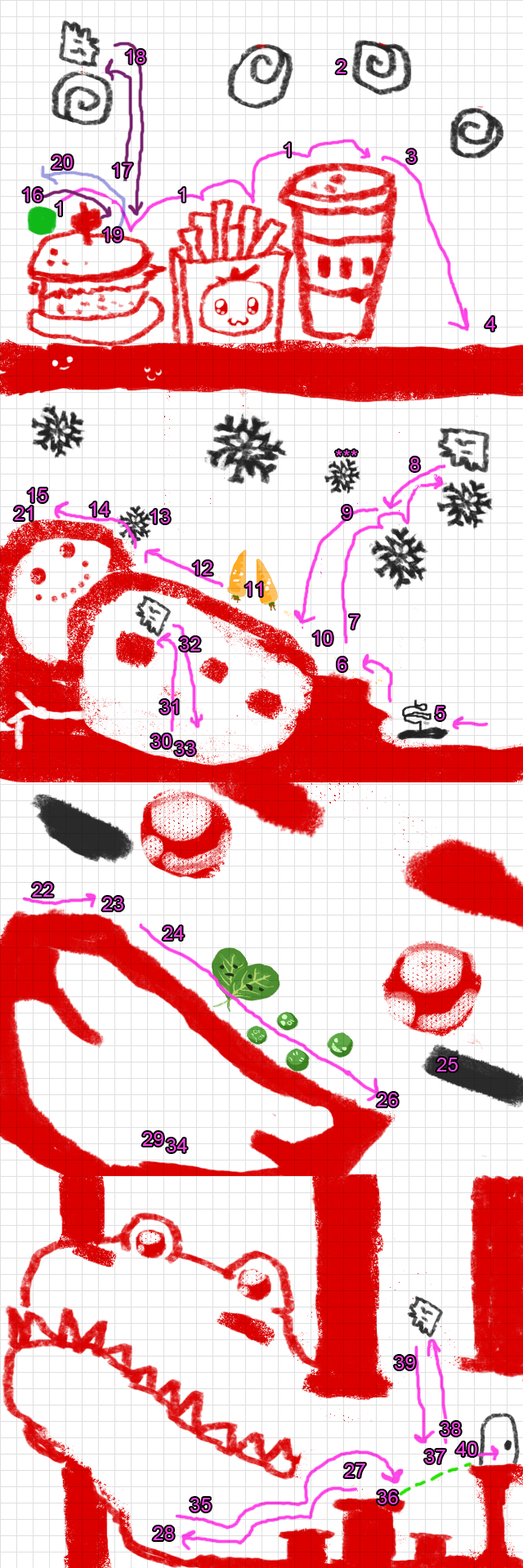
<style>
.page{position:relative;width:523px;height:1568px;background:#ffffff}
.page>*{position:absolute;margin:0}
.t1{font:19.6px "ArialMT";color:#ff44e7}
.t2{font:19.6px "ArialMT";color:#ff8cf0}
.t3{font:19.6px "ArialMT";color:#ff45e7}
.t4{font:19.6px "ArialMT";color:#ff48e8}
.t5{font:19.6px "ArialMT";color:#fe54e8}
</style>
<div class="page">
<p class="t1" style="left:126px;top:50px;width:19px;height:14px">18</p>
<p class="t1" style="left:336px;top:60px;width:10px;height:14px">2</p>
<p class="t2" style="left:284px;top:143px;width:7px;height:14px">1</p>
<p class="t1" style="left:407px;top:149px;width:9px;height:14px">3</p>
<p class="t3" style="left:51px;top:155px;width:22px;height:14px">20</p>
<p class="t1" style="left:113px;top:163px;width:19px;height:14px">17</p>
<p class="t4" style="left:23px;top:188px;width:19px;height:14px">16</p>
<p class="t2" style="left:179px;top:188px;width:6px;height:14px">1</p>
<p class="t2" style="left:56px;top:202px;width:6px;height:14px">1</p>
<p class="t1" style="left:485px;top:317px;width:11px;height:14px">4</p>
<p class="t1" style="left:335px;top:450px;width:22px;height:6px">***</p>
<p class="t1" style="left:410px;top:457px;width:10px;height:14px">8</p>
<p class="t1" style="left:28px;top:488px;width:19px;height:14px">15</p>
<p class="t1" style="left:14px;top:506px;width:19px;height:14px">21</p>
<p class="t1" style="left:90px;top:502px;width:19px;height:14px">14</p>
<p class="t1" style="left:150px;top:510px;width:20px;height:13px">13</p>
<p class="t1" style="left:341px;top:506px;width:11px;height:13px">9</p>
<p class="t1" style="left:193px;top:561px;width:19px;height:14px">12</p>
<p class="t1" style="left:245px;top:582px;width:17px;height:14px">11</p>
<p class="t5" style="left:349px;top:615px;width:10px;height:14px">7</p>
<p class="t1" style="left:180px;top:637px;width:20px;height:14px">32</p>
<p class="t1" style="left:313px;top:631px;width:19px;height:14px">10</p>
<p class="t1" style="left:336px;top:657px;width:11px;height:14px">6</p>
<p class="t1" style="left:160px;top:700px;width:18px;height:14px">31</p>
<p class="t1" style="left:435px;top:706px;width:10px;height:14px">5</p>
<p class="t1" style="left:151px;top:734px;width:21px;height:14px">30</p>
<p class="t1" style="left:175px;top:742px;width:20px;height:13px">33</p>
<p class="t1" style="left:32px;top:883px;width:21px;height:14px">22</p>
<p class="t1" style="left:102px;top:897px;width:21px;height:14px">23</p>
<p class="t1" style="left:163px;top:926px;width:21px;height:14px">24</p>
<p class="t4" style="left:436px;top:1058px;width:21px;height:13px">25</p>
<p class="t4" style="left:376px;top:1093px;width:22px;height:14px">26</p>
<p class="t1" style="left:142px;top:1132px;width:21px;height:14px">29</p>
<p class="t1" style="left:167px;top:1138px;width:20px;height:14px">34</p>
<p class="t3" style="left:394px;top:1356px;width:21px;height:14px">39</p>
<p class="t3" style="left:440px;top:1422px;width:21px;height:14px">38</p>
<p class="t3" style="left:456px;top:1442px;width:21px;height:14px">40</p>
<p class="t3" style="left:425px;top:1450px;width:20px;height:13px">37</p>
<p class="t1" style="left:344px;top:1463px;width:21px;height:14px">27</p>
<p class="t3" style="left:377px;top:1490px;width:21px;height:14px">36</p>
<p class="t1" style="left:190px;top:1498px;width:21px;height:14px">35</p>
<p class="t1" style="left:153px;top:1526px;width:21px;height:14px">28</p>
</div>
